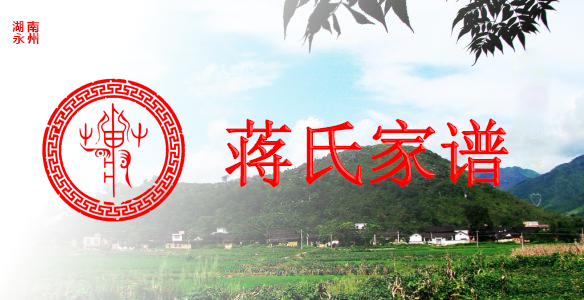
<style>
.page{position:relative;width:584px;height:300px}
.page>*{position:absolute;margin:0}
.t1{font:12.2px "MicrosoftYaHei-Bold";letter-spacing:0.2em}
.t2{font:72px "SimSun"}
</style>
<div class="page">
<p class="t1" style="left:12px;top:20px;width:28px;height:13px">湖南</p>
<p class="t1" style="left:12px;top:33px;width:27px;height:11px">永州</p>
<p class="t2" style="left:226px;top:119px;width:282px;height:68px">蒋氏家谱</p>
</div>
